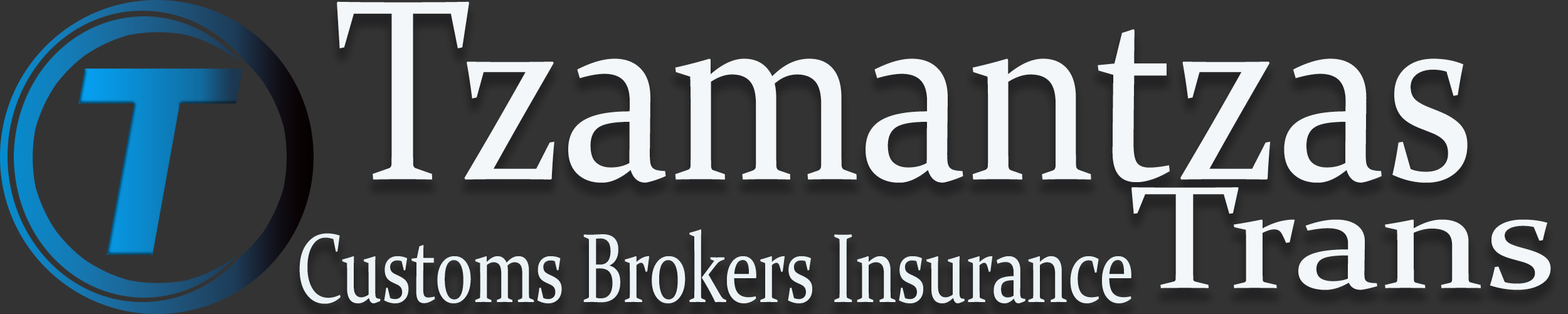
<style>
.page{position:relative;width:1568px;height:314px;background:#333333}
.page>*{position:absolute;margin:0}
.t1{font:258.9px "Constantia";color:#f3f7f9;scale:0.85 1}
.t2{font:146.6px "Constantia";color:#f3f7f9;scale:1.22 1}
.t3{font:98.3px "Constantia";color:#ecf3f6;scale:0.72 1}
</style>
<div class="page">
<p class="t1" style="left:337px;top:1px;width:1131px;height:182px">Tzamantzas</p>
<p class="t2" style="left:1131px;top:187px;width:420px;height:103px">Trans</p>
<p class="t3" style="left:299px;top:229px;width:832px;height:75px">Customs Brokers Insurance</p>
</div>
